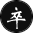
<style>
.page{position:relative;width:33px;height:33px;background:#0f0f0f}
.page>*{position:absolute;margin:0}
.t1{font:24px "STXinwei";color:#ffffff}
</style>
<div class="page">
<p class="t1" style="left:7px;top:7px;width:19px;height:22px">卒</p>
</div>
